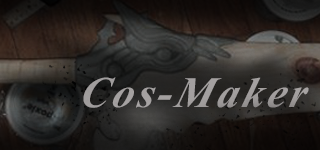
<style>
.page{position:relative;width:320px;height:150px}
.page>*{position:absolute;margin:0}
.t1{font:53.8px "Vijaya-Bold";letter-spacing:0.06em;color:#a29f9e}
</style>
<div class="page">
<p class="t1" style="left:83px;top:77px;width:226px;height:31px">Cos-Maker</p>
</div>
